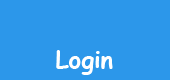
<style>
.page{position:relative;width:170px;height:80px;background:#2c97ea}
.page>*{position:absolute;margin:0}
.t1{font:24px "ComicSansMS-Bold";color:#ffffff}
</style>
<div class="page">
<p class="t1" style="left:56px;top:50px;width:57px;height:25px">Login</p>
</div>
